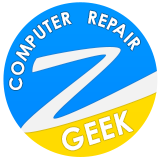
<style>
.page{position:relative;width:161px;height:159px;background:#ffffff}
.page>*{position:absolute;margin:0}
.t1{font:17.5px "CenturyGothic-Bold";color:#ffffff;text-transform:uppercase}
.t2{font:17.5px "CenturyGothic-Bold";letter-spacing:-0.12em;color:#ffffff;text-transform:uppercase}
.t3{font:30px "CenturyGothic-Bold";letter-spacing:0.025em;color:#ffffff;text-transform:uppercase;scale:0.95 1}
</style>
<div class="page">
<p class="t1" style="left:9px;top:10px;width:131px;height:80px;rotate:44deg">Computer   Re<span class="t2">pa </span>ir</p>
<p class="t3" style="left:62px;top:110px;width:72px;height:41px;rotate:-18deg">Geek</p>
</div>
